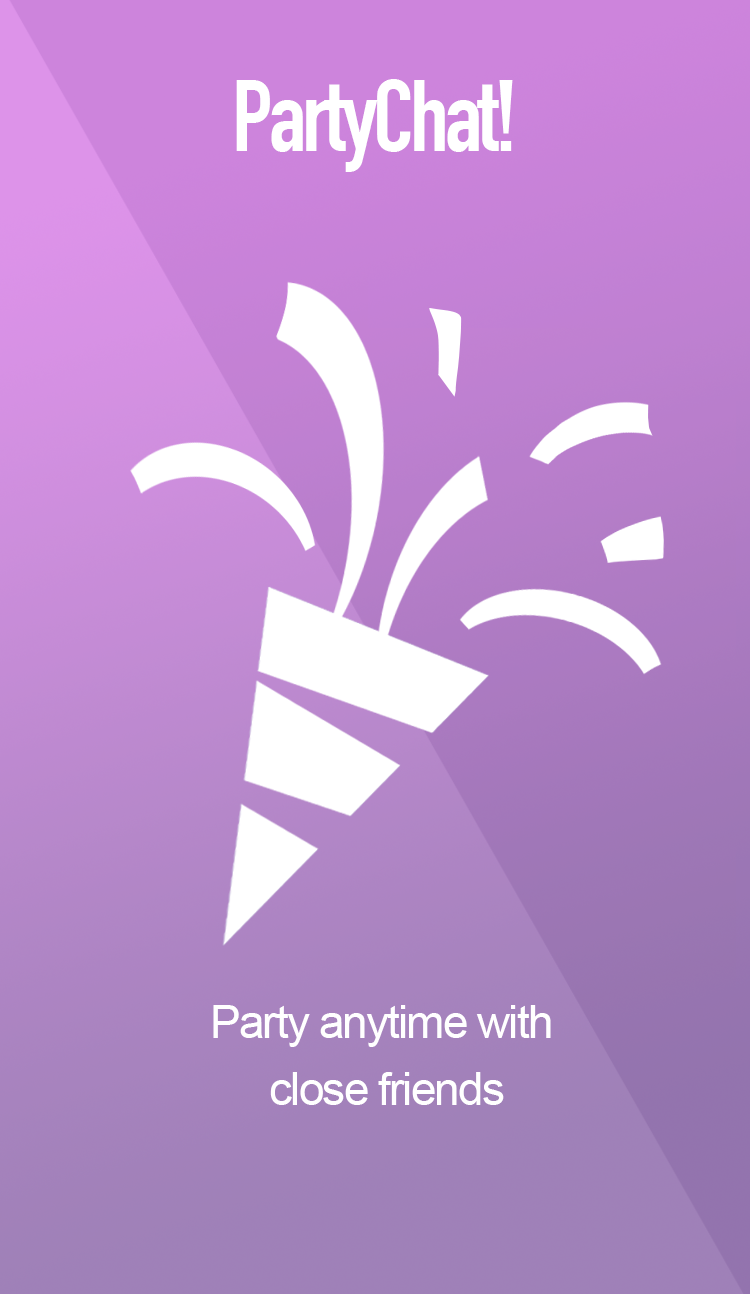
<style>
.page{position:relative;width:750px;height:1294px}
.page>*{position:absolute;margin:0}
.t1{font:100px "DINCondensed-Bold";letter-spacing:-0.04em;color:#ffffff}
.t2{font:45.8px/66.7px "ArialMT";letter-spacing:-0.04em;color:#ffffff}
</style>
<div class="page">
<p class="t1" style="left:236px;top:79px;width:277px;height:93px">PartyChat!</p>
<p class="t2" style="left:213px;top:1005px;width:338px;height:100px;text-align:center">Party anytime with <br>close friends</p>
</div>
